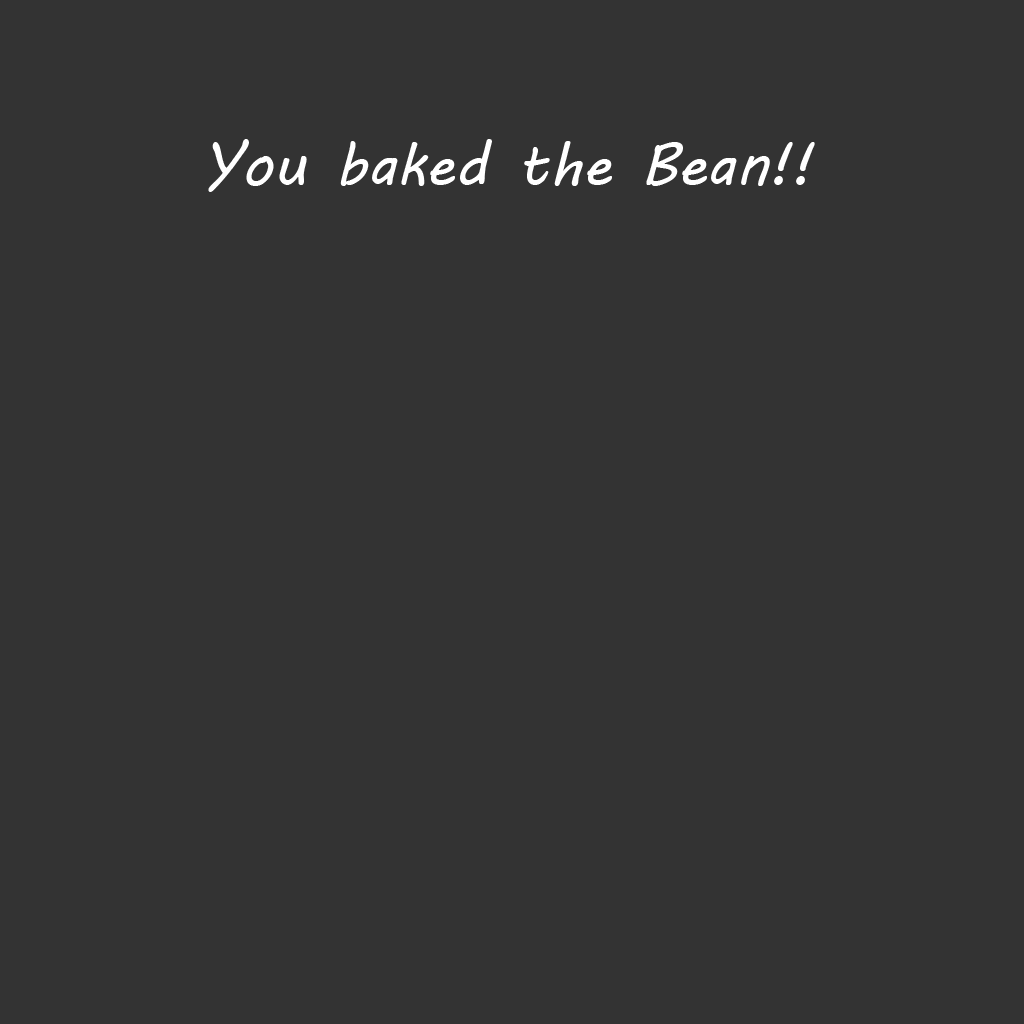
<style>
.page{position:relative;width:1024px;height:1024px;background:#333333}
.page>*{position:absolute;margin:0}
.t1{font:60px "MVBoli";color:#ffffff}
</style>
<div class="page">
<p class="t1" style="left:208px;top:139px;width:607px;height:53px">You baked the Bean!!</p>
</div>
